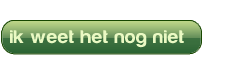
<style>
.page{position:relative;width:241px;height:59px;background:#ffffff}
.page>*{position:absolute;margin:0}
.t1{font:19px "Harabara-Bold";letter-spacing:0.04em;color:#eaf9c3;scale:1.1 1}
</style>
<div class="page">
<p class="t1" style="left:10px;top:30px;width:174px;height:18px">ik weet het nog niet</p>
</div>
